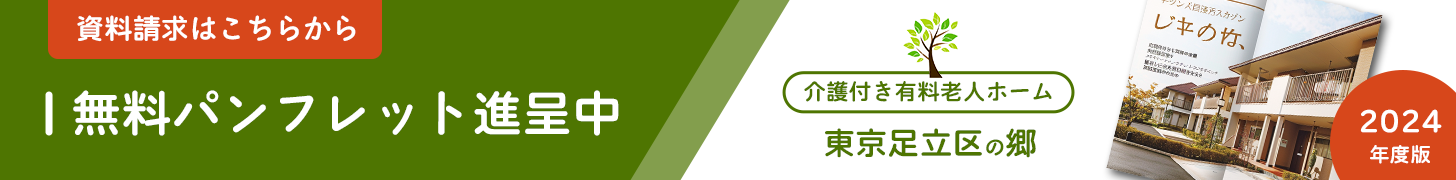
<style>
.page{position:relative;width:1456px;height:180px;background:#4e7501}
.page>*{position:absolute;margin:0}
.t1{font:28.4px "BokutohRera-5";color:#ffffff}
.t2{font:22.8px "BokutohRera-5";color:#4e7501}
.t3{font:50.2px "BokutohRera-5";color:#ffffff}
.t4{font:29px/30.2px "BokutohRera-5";color:#ffffff}
.t5{font:20.6px/30.2px "BokutohRera-5";color:#ffffff}
.t6{font:32.3px "BokutohRera-5";color:#4e7501}
.t7{font:21.1px "BokutohRera-5";color:#4e7501}
</style>
<div class="page">
<p class="t1" style="left:77px;top:15px;width:279px;height:27px">資料請求はこちらから</p>
<p class="t2" style="left:804px;top:81px;width:248px;height:21px">介護付き有料老人ホーム</p>
<p class="t3" style="left:73px;top:90px;width:546px;height:46px">無料パンフレット進呈中</p>
<p class="t4" style="left:1360px;top:109px;width:82px;height:55px;text-align:center">2024<br><span class="t5">年度版</span></p>
<p class="t6" style="left:825px;top:128px;width:211px;height:30px">東京足立区<span class="t7">の</span>郷</p>
</div>
